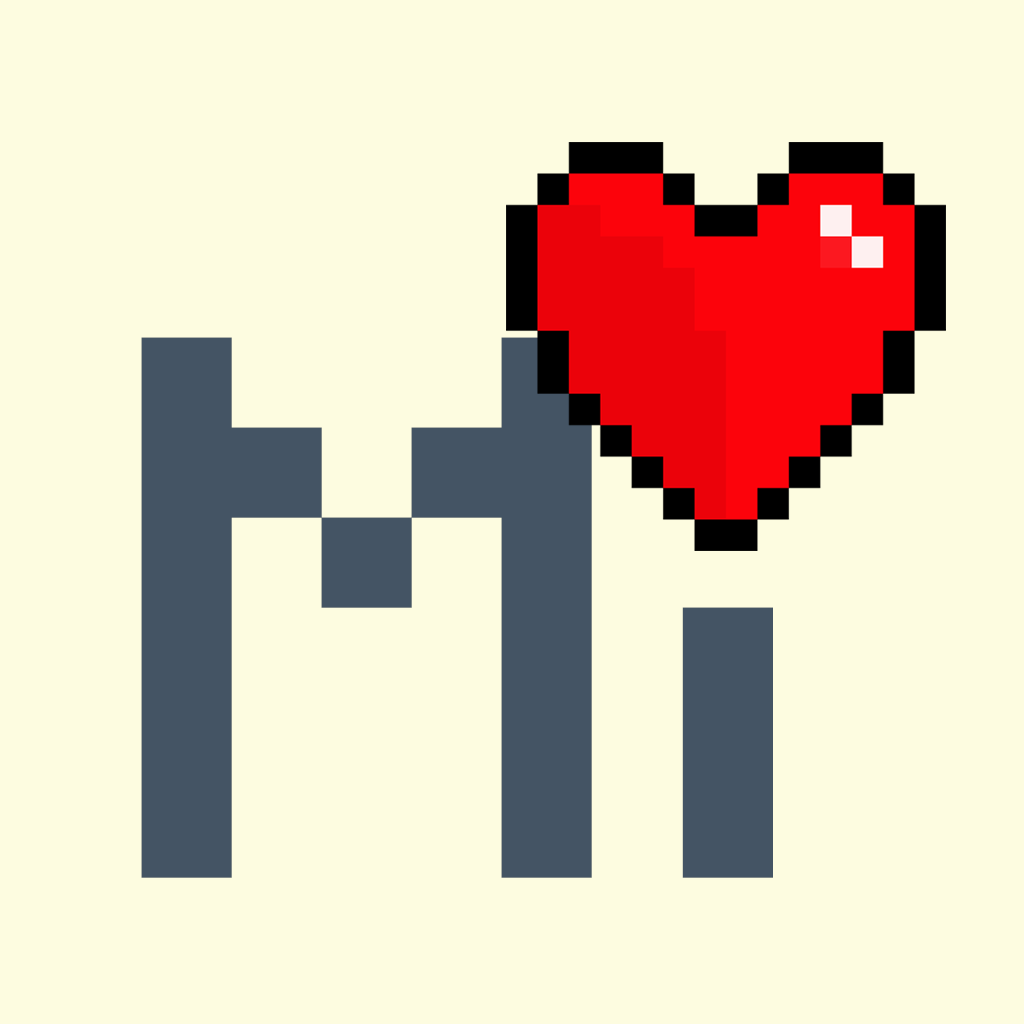
<style>
.page{position:relative;width:1024px;height:1024px;background:#fdfce0}
.page>*{position:absolute;margin:0}
.t1{font:450px "Pixeled";letter-spacing:0.003em;color:#445464}
</style>
<div class="page">
<p class="t1" style="left:141px;top:337px;width:632px;height:541px">Mi</p>
</div>
